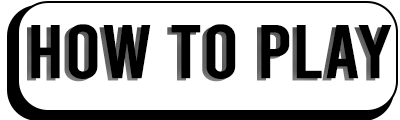
<style>
.page{position:relative;width:400px;height:120px;background:#ffffff}
.page>*{position:absolute;margin:0}
.t1{font:76.2px "Bebas-Regular";color:#646464;scale:1.11 1}
.t2{font:76.2px "Bebas-Regular";color:#000000;scale:1.11 1}
</style>
<div class="page">
<p class="t1" style="left:27px;top:26px;width:361px;height:56px">how to play</p>
<p class="t2" style="left:31px;top:24px;width:361px;height:55px">how to play</p>
</div>
